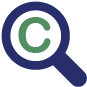
<style>
.page{position:relative;width:87px;height:87px;background:#ffffff}
.page>*{position:absolute;margin:0}
.t1{font:50px "ArialRoundedMTBold";color:#518e61}
</style>
<div class="page">
<p class="t1" style="left:18px;top:17px;width:33px;height:36px">C</p>
</div>
